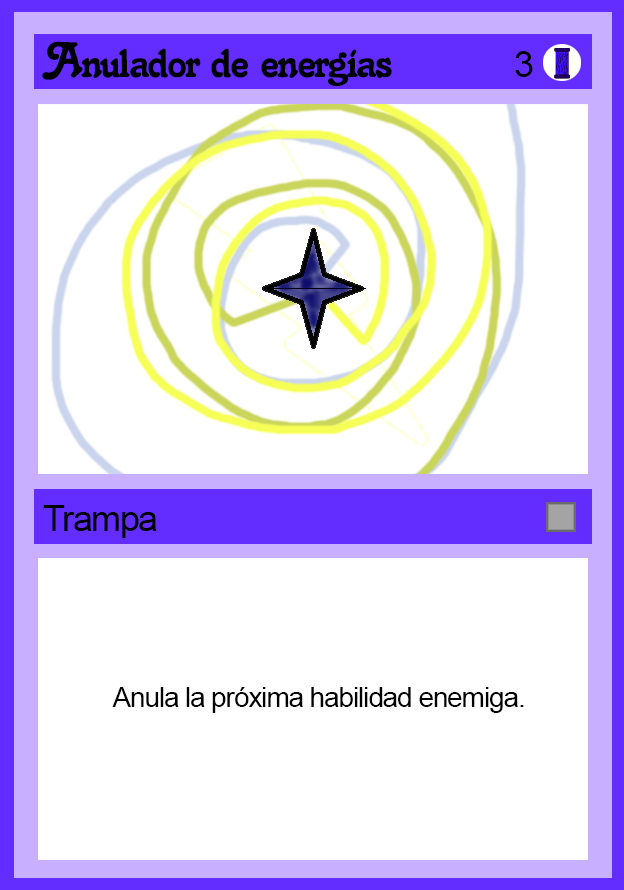
<style>
.page{position:relative;width:624px;height:890px;background:#ffffff}
.page>*{position:absolute;margin:0}
.t1{font:48px "Salina";letter-spacing:-0.04em;color:#000000}
.t2{font:36px "ArialMT";letter-spacing:-0.04em;color:#000000}
.t3{font:28px "ArialMT";letter-spacing:-0.04em;color:#000000}
</style>
<div class="page">
<p class="t1" style="left:42px;top:41px;width:350px;height:45px">Anulador de energías</p>
<p class="t2" style="left:515px;top:51px;width:18px;height:26px">3</p>
<p class="t2" style="left:43px;top:505px;width:114px;height:33px">Trampa</p>
<p class="t3" style="left:112px;top:687px;width:412px;height:26px">Anula la próxima habilidad enemiga.</p>
</div>
